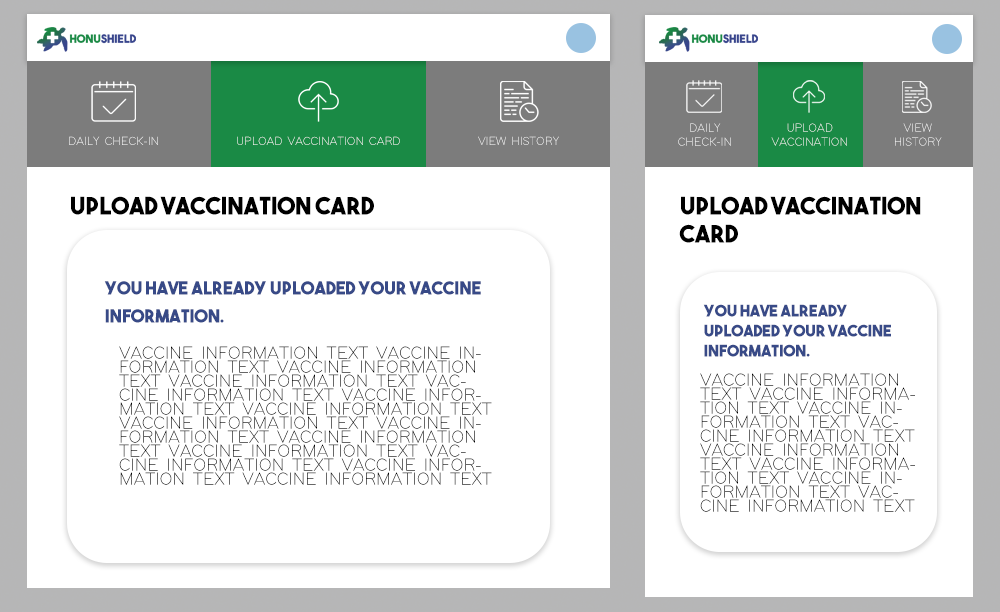
<style>
.page{position:relative;width:1000px;height:612px;background:#ffffff}
.page>*{position:absolute;margin:0}
.t1{font:12px/14px "ModernSansLight"}
.t2{font:12px "ModernSansLight"}
.t3{font:24px "TheBoldFont";color:#000000}
.t4{font:24px/14px "TheBoldFont";color:#000000}
.t5{font:18px/14px "TheBoldFont";color:#384a87}
.t6{font:16px/10px "TheBoldFont";color:#384a87}
.t7{font:18px/14px "ModernSansLight";color:#000000}
</style>
<div class="page">
<p class="t1" style="left:678px;top:123px;width:53px;height:23px;text-align:center">DAILY<br>CHECK-IN</p>
<p class="t1" style="left:771px;top:123px;width:76px;height:23px;text-align:center">UPLOAD<br>VACCINATION</p>
<p class="t1" style="left:895px;top:123px;width:47px;height:23px;text-align:center">VIEW<br>HISTORY</p>
<p class="t2" style="left:69px;top:136px;width:490px;height:9px">DAILY CHECK-IN               UPLOAD VACCINATION CARD               VIEW HISTORY</p>
<p class="t3" style="left:71px;top:196px;width:303px;height:19px">UPLOAD VACCINATION CARD</p>
<p class="t4" style="left:679px;top:196px;width:242px;height:47px">UPLOAD VACCINATION <br><br>CARD</p>
<p class="t5" style="left:104px;top:281px;width:377px;height:42px">You have already uploaded your vaccine<br><br>Information.</p>
<p class="t6" style="left:703px;top:304px;width:188px;height:53px">You have already <br><br>uploaded your vaccine<br><br>Information.</p>
<p class="t7" style="left:119px;top:346px;width:373px;height:139px">VACCINE INFORMATION TEXT VACCINE INFORMATION TEXT VACCINE INFORMATION TEXT VACCINE INFORMATION TEXT VACCINE INFORMATION TEXT VACCINE INFORMATION TEXT VACCINE INFORMATION TEXT VACCINE INFORMATION TEXT VACCINE INFORMATION TEXT VACCINE INFORMATION TEXT VACCINE INFORMATION TEXT VACCINE INFORMATION TEXT VACCINE INFORMATION TEXT VACCINE INFORMATION TEXT</p>
<p class="t7" style="left:700px;top:373px;width:215px;height:139px">VACCINE INFORMATION TEXT VACCINE INFORMATION TEXT VACCINE INFORMATION TEXT VACCINE INFORMATION TEXT VACCINE INFORMATION TEXT VACCINE INFORMATION TEXT VACCINE INFORMATION TEXT VACCINE INFORMATION TEXT VACCINE INFORMATION TEXT VACCINE INFORMATION TEXT VACCINE INFORMATION TEXT VACCINE INFORMATION TEXT VACCINE INFORMATION TEXT VACCINE INFORMATION TEXT</p>
</div>
